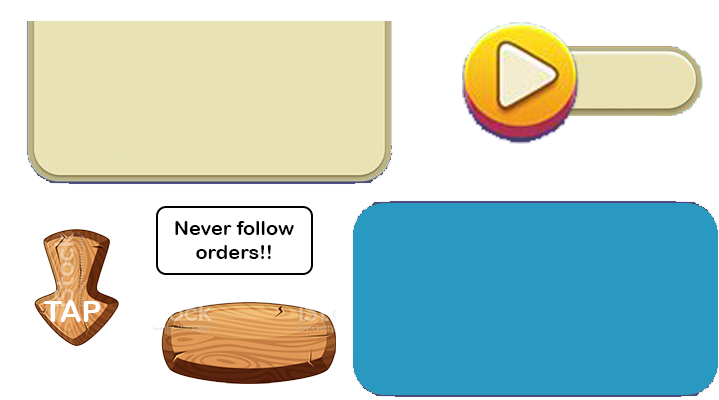
<style>
.page{position:relative;width:719px;height:400px;background:#ffffff}
.page>*{position:absolute;margin:0}
.t1{font:20px "ArialRoundedMTBold";color:#000000}
.t2{font:30px "ArialRoundedMTBold";color:#ffffff}
</style>
<div class="page">
<p class="t1" style="left:175px;top:221px;width:119px;height:38px;text-align:center">Never follow<br>!!orders</p>
<p class="t2" style="left:43px;top:300px;width:58px;height:22px">TAP</p>
</div>
